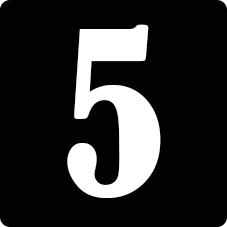
<style>
.page{position:relative;width:227px;height:227px;background:#020203}
.page>*{position:absolute;margin:0}
.t1{font:216px "BernardMT-Condensed";color:#ffffff}
</style>
<div class="page">
<p class="t1" style="left:67px;top:24px;width:94px;height:174px">5</p>
</div>
